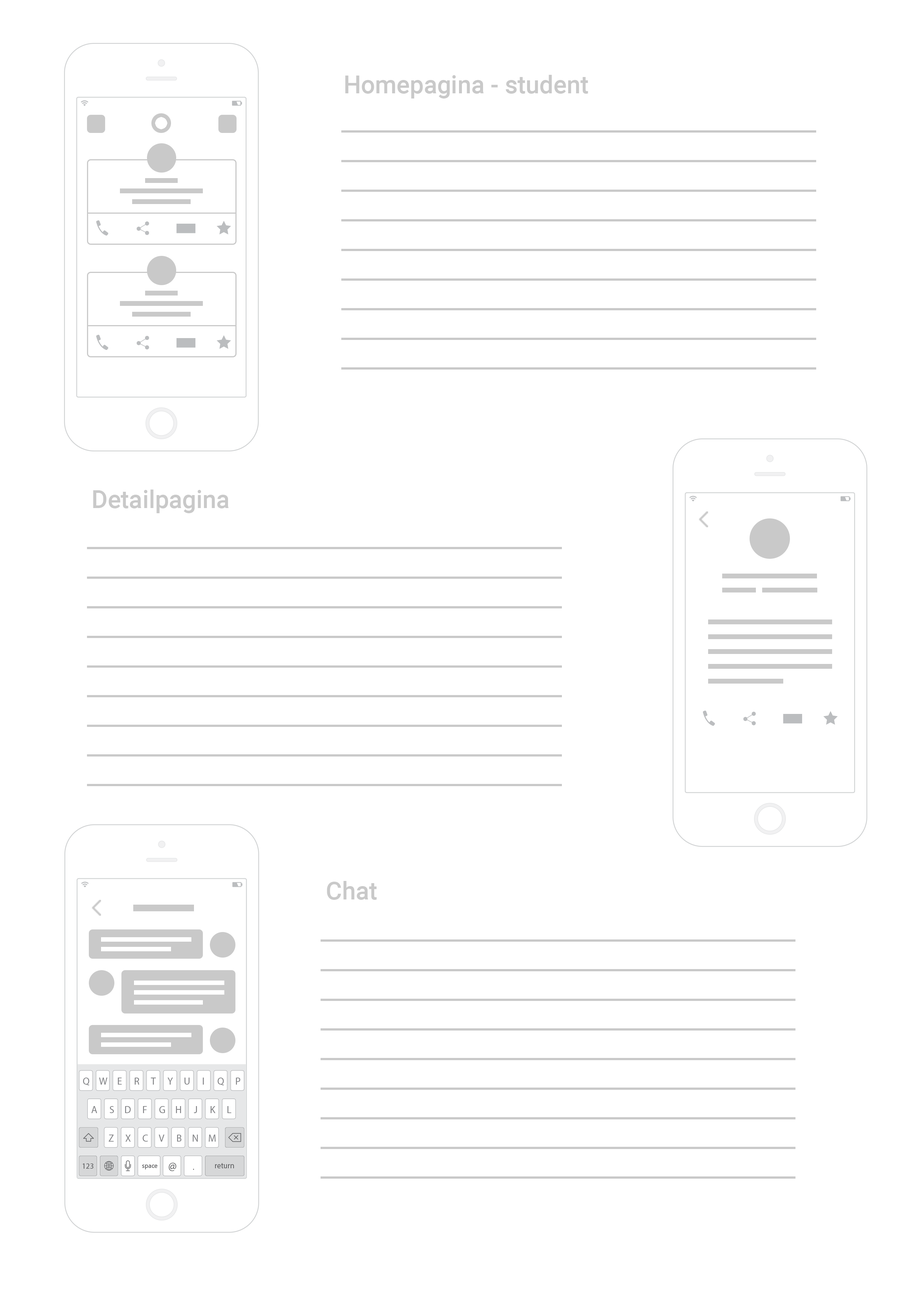
<style>
.page{position:relative;width:918px;height:1299px;background:#ffffff}
.page>*{position:absolute;margin:0}
.t1{font:24.7px "Roboto-Medium";color:#c9c9c9}
</style>
<div class="page">
<p class="t1" style="left:345px;top:75px;width:243px;height:23px">Homepagina - student</p>
<p class="t1" style="left:93px;top:489px;width:136px;height:24px">Detailpagina</p>
<p class="t1" style="left:327px;top:881px;width:50px;height:19px">Chat</p>
</div>
